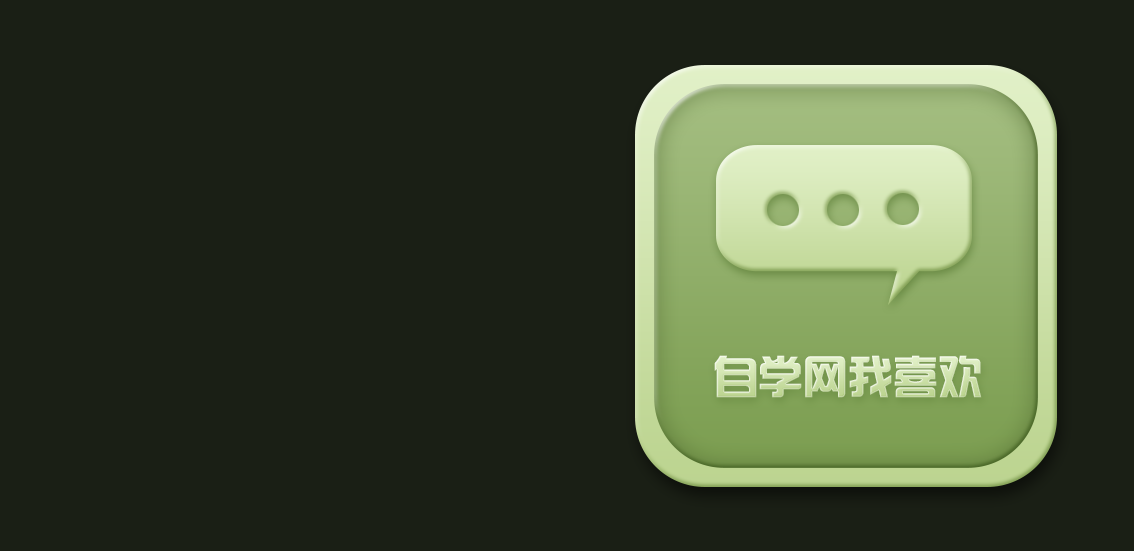
<style>
.page{position:relative;width:1134px;height:551px;background:#1a1f15}
.page>*{position:absolute;margin:0}
.t1{font:45px "hzgb"}
</style>
<div class="page">
<p class="t1" style="left:714px;top:355px;width:268px;height:43px">自学网我喜欢</p>
</div>
